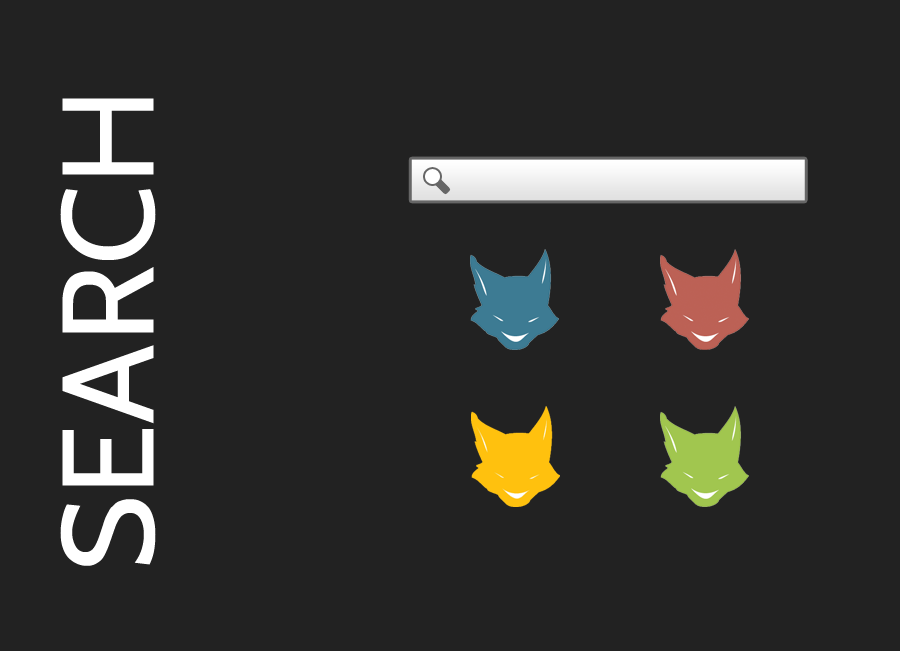
<style>
.page{position:relative;width:900px;height:651px;background:#222222}
.page>*{position:absolute;margin:0}
.t1{font:130px "Cabin-Regular";color:#ffffff}
</style>
<div class="page">
<p class="t1" style="left:60px;top:98px;width:96px;height:468px;rotate:-90deg">SEARCH</p>
</div>
